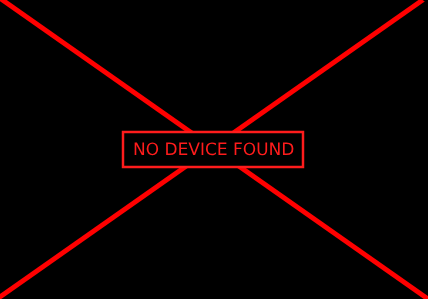
<style>
.page{position:relative;width:428px;height:299px;background:#000000}
.page>*{position:absolute;margin:0}
.t1{font:17px "DejaVuSans";color:#fe1c1c}
</style>
<div class="page">
<p class="t1" style="left:134px;top:142px;width:160px;height:14px">NO DEVICE FOUND</p>
</div>
